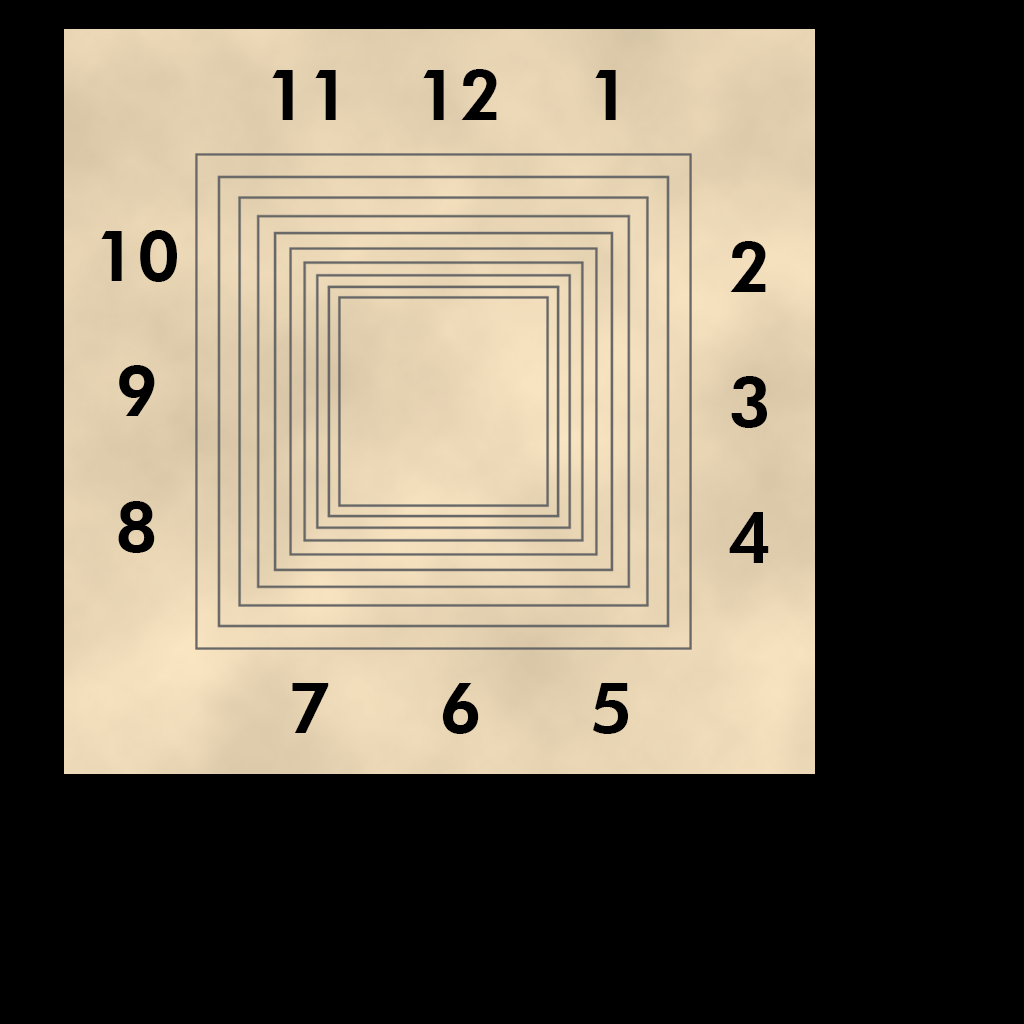
<style>
.page{position:relative;width:1024px;height:1024px;background:#000000}
.page>*{position:absolute;margin:0}
.t1{font:70.3px "FuturaBT-Heavy";color:#000000}
.t2{font:70.3px/45.1px "FuturaBT-Heavy";color:#000000}
</style>
<div class="page">
<p class="t1" style="left:272px;top:69px;width:344px;height:51px">11   12    1</p>
<p class="t2" style="left:101px;top:230px;width:76px;height:323px;text-align:center">10<br><br><br>9<br><br><br>8</p>
<p class="t2" style="left:729px;top:241px;width:40px;height:322px">2<br><br><br>3<br><br><br>4</p>
<p class="t1" style="left:292px;top:683px;width:336px;height:51px">7     6     5</p>
</div>
